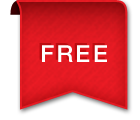
<style>
.page{position:relative;width:140px;height:120px;background:#ffffff}
.page>*{position:absolute;margin:0}
.t1{font:23.6px "HelveticaNeueLTStd-Md";letter-spacing:0.1em;color:#be0c11}
.t2{font:23.6px "HelveticaNeueLTStd-Md";letter-spacing:0.1em;color:#ffffff}
</style>
<div class="page">
<p class="t1" style="left:39px;top:43px;width:66px;height:17px">FREE</p>
<p class="t2" style="left:42px;top:45px;width:65px;height:17px">FREE</p>
</div>
